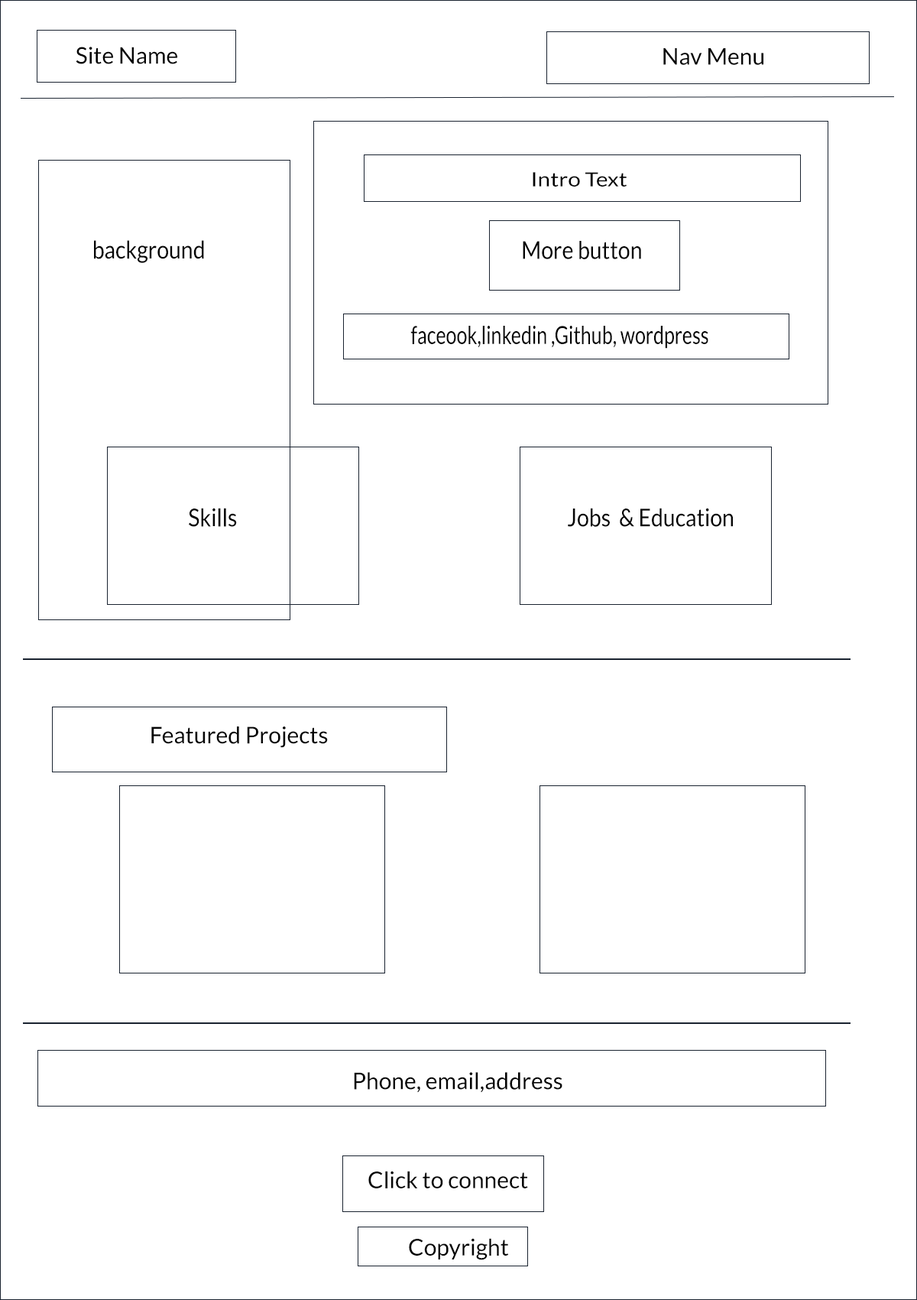
<style>
.page{position:relative;width:917px;height:1300px;background:#ffffff}
.page>*{position:absolute;margin:0}
.t1{font:22.9px "Lato-Regular";color:#030303}
.t2{font:19.6px "Lato-Regular";color:#030303;scale:1.16 1}
.t3{font:17px "Lato-Regular";color:#030303;scale:1.16 1}
.t4{font:24.6px "Lato-Regular";color:#030303;scale:0.89 1}
.t5{font:24.6px "Lato-Regular";color:#030303;scale:0.78 1}
</style>
<div class="page">
<p class="t1" style="left:76px;top:47px;width:101px;height:17px">Site Name</p>
<p class="t1" style="left:664px;top:48px;width:100px;height:17px">Nav Menu</p>
<p class="t2" style="left:533px;top:172px;width:94px;height:15px"><span class="t3">                   </span>Intro Text</p>
<p class="t4" style="left:94px;top:240px;width:110px;height:23px">background</p>
<p class="t4" style="left:523px;top:241px;width:118px;height:18px">More button</p>
<p class="t5" style="left:411px;top:326px;width:298px;height:23px">faceook,linkedin ,Github, wordpress</p>
<p class="t4" style="left:189px;top:508px;width:48px;height:19px">Skills</p>
<p class="t4" style="left:568px;top:508px;width:165px;height:19px">Jobs  &amp; Education</p>
<p class="t1" style="left:151px;top:726px;width:177px;height:22px">Featured Projects</p>
<p class="t1" style="left:354px;top:1072px;width:209px;height:21px">Phone, email,address</p>
<p class="t1" style="left:369px;top:1171px;width:159px;height:17px">Click to connect</p>
<p class="t1" style="left:409px;top:1238px;width:100px;height:22px">Copyright</p>
</div>
